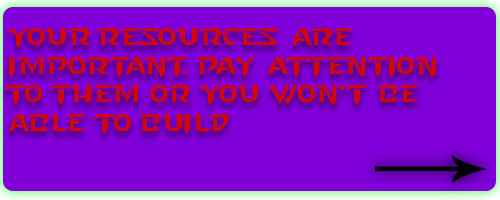
<style>
.page{position:relative;width:500px;height:200px;background:#8000d9}
.page>*{position:absolute;margin:0}
.t1{font:24px "StarcraftNormal";color:#d20606}
</style>
<div class="page">
<p class="t1" style="left:5px;top:28px;width:431px;height:106px">Your resources are <br>important. pay attention to them or you won't be able to build</p>
</div>
